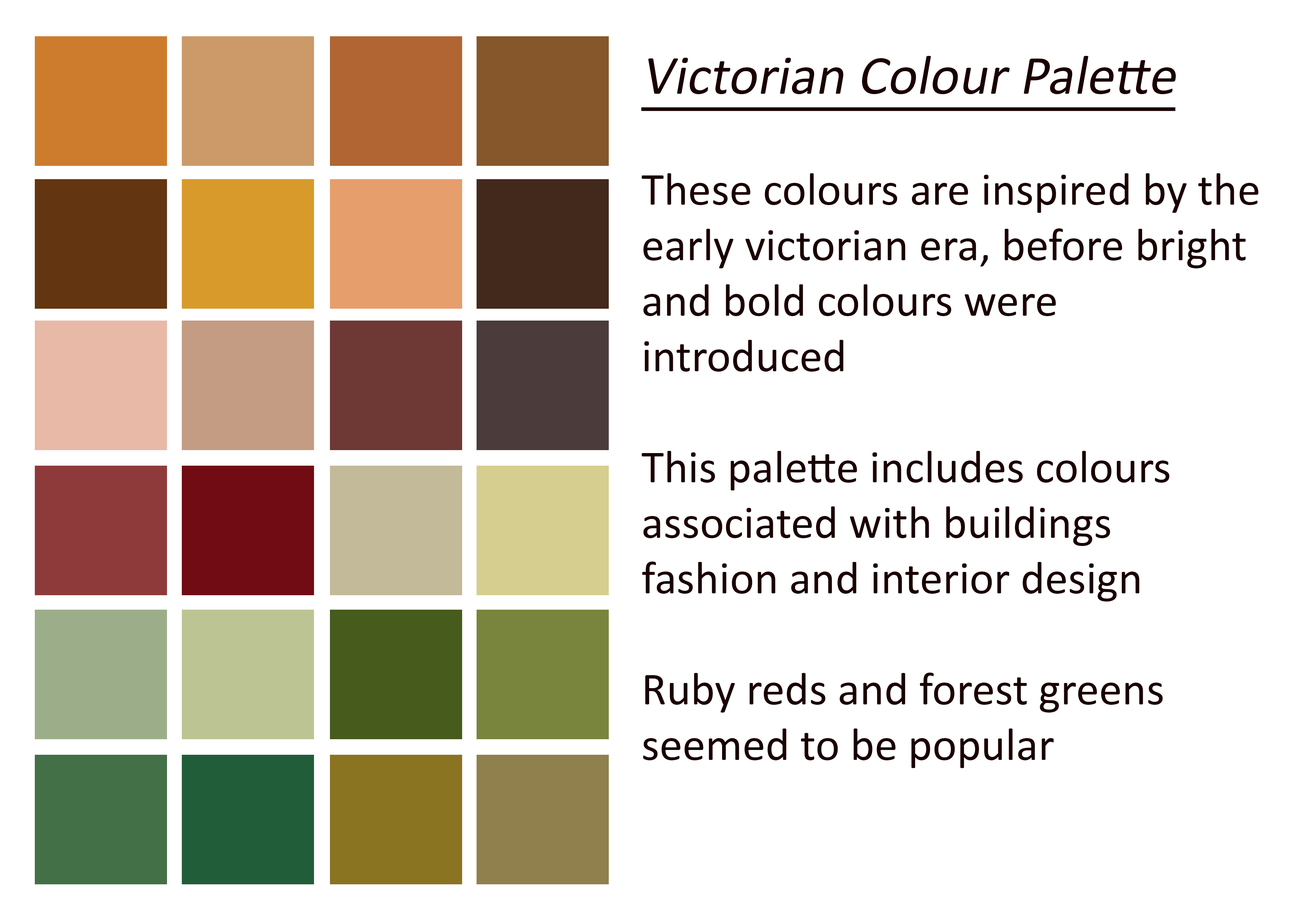
<style>
.page{position:relative;width:1299px;height:918px;background:#ffffff}
.page>*{position:absolute;margin:0}
.t1{font:46.3px "Calibri";color:#1a0000}
.t2{font:55.5px "Calibri";color:#1a0000;font-style:italic;text-decoration:underline}
</style>
<div class="page">
<p class="t1" style="left:641px;top:56px;width:617px;height:712px;text-align:right"><span class="t2">Victorian Colour Palette<br></span><br>These colours are inspired by the early victorian era, before bright and bold colours were <br>introduced <br><br>This palette includes colours <br>associated with buildings<br>fashion and interior design <br><br>Ruby reds and forest greens seemed to be popular</p>
</div>
